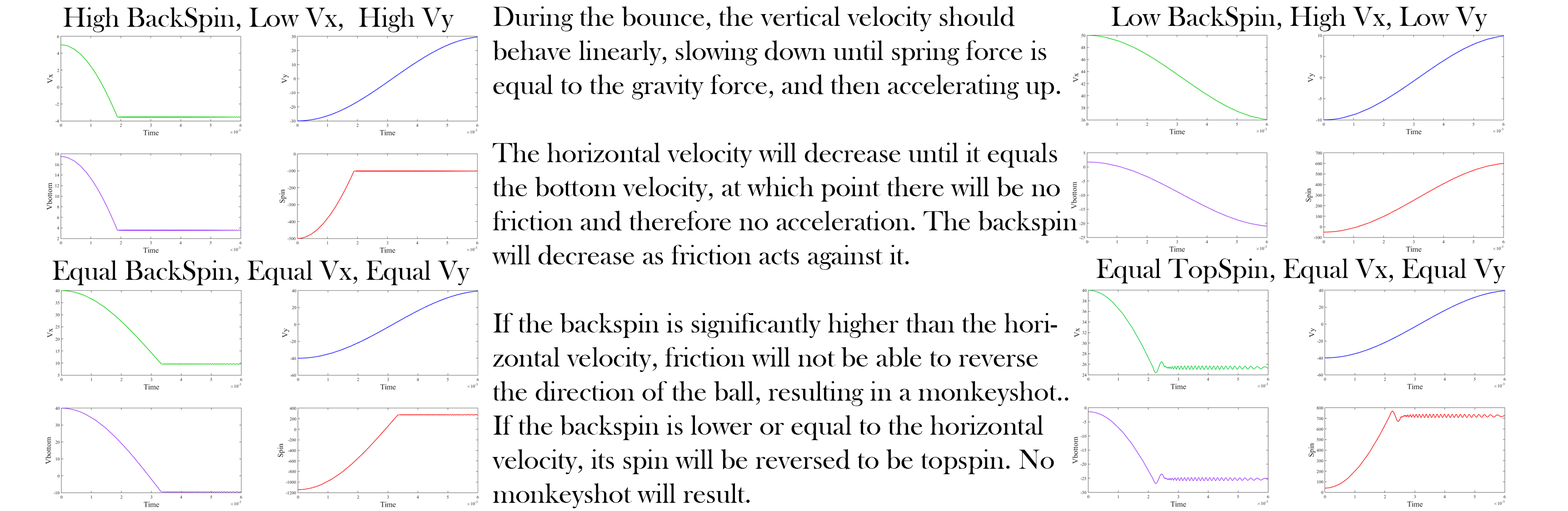
<style>
.page{position:relative;width:1568px;height:511px;background:#ffffff}
.page>*{position:absolute;margin:0}
.t1{font:28.4px "BaskOldFace";color:#040404}
</style>
<div class="page">
<p class="t1" style="left:63px;top:7px;width:391px;height:25px">High BackSpin, Low Vx,  High Vy</p>
<p class="t1" style="left:492px;top:6px;width:586px;height:503px">During the bounce, the vertical velocity should behave linearly, slowing down until spring force is equal to the gravity force, and then accelerating up.<br><br>The horizontal velocity will decrease until it equals the bottom velocity, at which point there will be no friction and therefore no acceleration. The backspin will decrease as friction acts against it. <br><br>If the backspin is significantly higher than the horizontal velocity, friction will not be able to reverse the direction of the ball, resulting in a monkeyshot..<br>If the backspin is lower or equal to the horizontal velocity, its spin will be reversed to be topspin. No monkeyshot will result.</p>
<p class="t1" style="left:1111px;top:6px;width:377px;height:25px">Low BackSpin, High Vx, Low Vy</p>
<p class="t1" style="left:52px;top:260px;width:418px;height:25px">Equal BackSpin, Equal Vx, Equal Vy</p>
<p class="t1" style="left:1096px;top:259px;width:410px;height:25px">Equal TopSpin, Equal Vx, Equal Vy</p>
</div>
